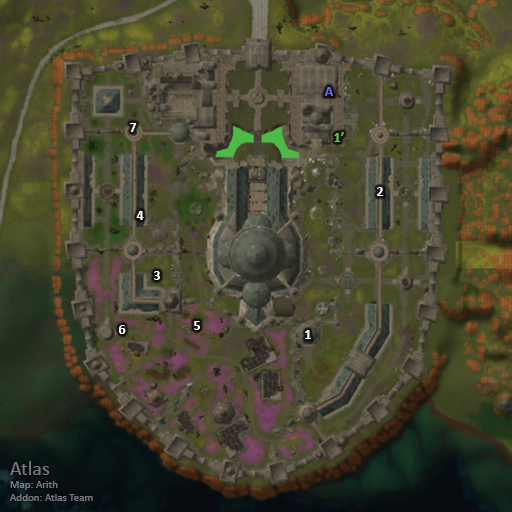
<style>
.page{position:relative;width:512px;height:512px}
.page>*{position:absolute;margin:0}
.t1{font:14px "Calibri-Bold";color:#6666ff}
.t2{font:14px "Calibri-Bold";color:#ffffff}
.t3{font:14px "Calibri-Bold";color:#66cc33}
.t4{font:11px "Calibri";color:#777a7a}
.t5{font:20px "Calibri";color:#777a7a}
</style>
<div class="page">
<p class="t1" style="left:324px;top:87px;width:9px;height:9px">A</p>
<p class="t2" style="left:129px;top:123px;width:8px;height:9px">7</p>
<p class="t3" style="left:334px;top:132px;width:10px;height:10px">1’</p>
<p class="t2" style="left:377px;top:187px;width:7px;height:9px">2</p>
<p class="t2" style="left:136px;top:211px;width:8px;height:9px">4</p>
<p class="t2" style="left:154px;top:271px;width:6px;height:9px">3</p>
<p class="t2" style="left:119px;top:325px;width:7px;height:9px">6</p>
<p class="t2" style="left:194px;top:321px;width:6px;height:9px">5</p>
<p class="t2" style="left:305px;top:330px;width:6px;height:9px">1</p>
<p class="t4" style="left:10px;top:461px;width:83px;height:40px"><span class="t5">Atlas<br></span>Map: Arith<br>Addon: Atlas Team</p>
</div>
